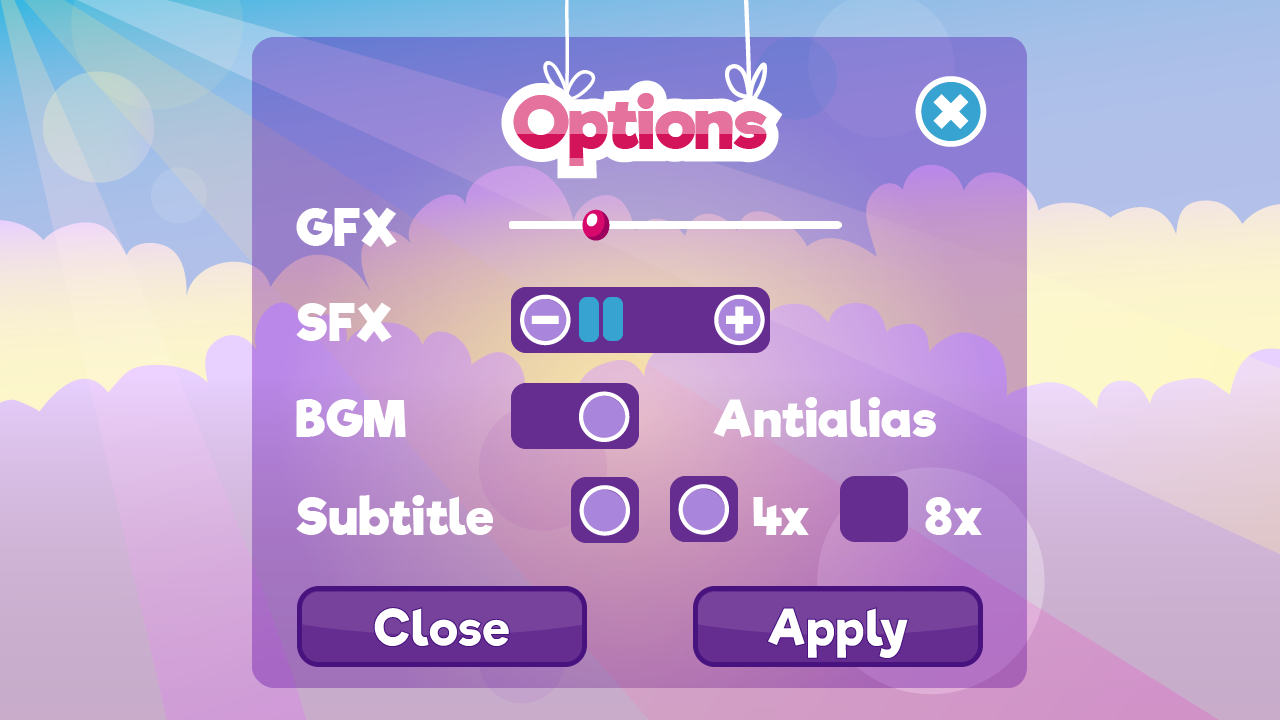
<style>
.page{position:relative;width:1280px;height:720px}
.page>*{position:absolute;margin:0}
.t1{font:70px "RifficFree-Bold"}
.t2{font:50px "RifficFree-Bold";letter-spacing:0.025em;color:#ffffff}
</style>
<div class="page">
<p class="t1" style="left:513px;top:93px;width:254px;height:73px">Options</p>
<p class="t1" style="left:513px;top:93px;width:254px;height:73px">Options</p>
<p class="t2" style="left:296px;top:207px;width:101px;height:40px">GFX</p>
<p class="t2" style="left:296px;top:302px;width:96px;height:40px">SFX</p>
<p class="t2" style="left:296px;top:399px;width:110px;height:38px">BGM</p>
<p class="t2" style="left:713px;top:397px;width:223px;height:41px">Antialias</p>
<p class="t2" style="left:296px;top:495px;width:197px;height:40px">Subtitle</p>
<p class="t2" style="left:753px;top:497px;width:56px;height:38px">4x</p>
<p class="t2" style="left:925px;top:497px;width:57px;height:38px">8x</p>
</div>
